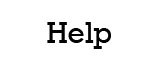
<style>
.page{position:relative;width:160px;height:70px;background:#ffffff}
.page>*{position:absolute;margin:0}
.t1{font:30px "Rockwell";color:#030303}
</style>
<div class="page">
<p class="t1" style="left:47px;top:22px;width:64px;height:27px">Help</p>
</div>
